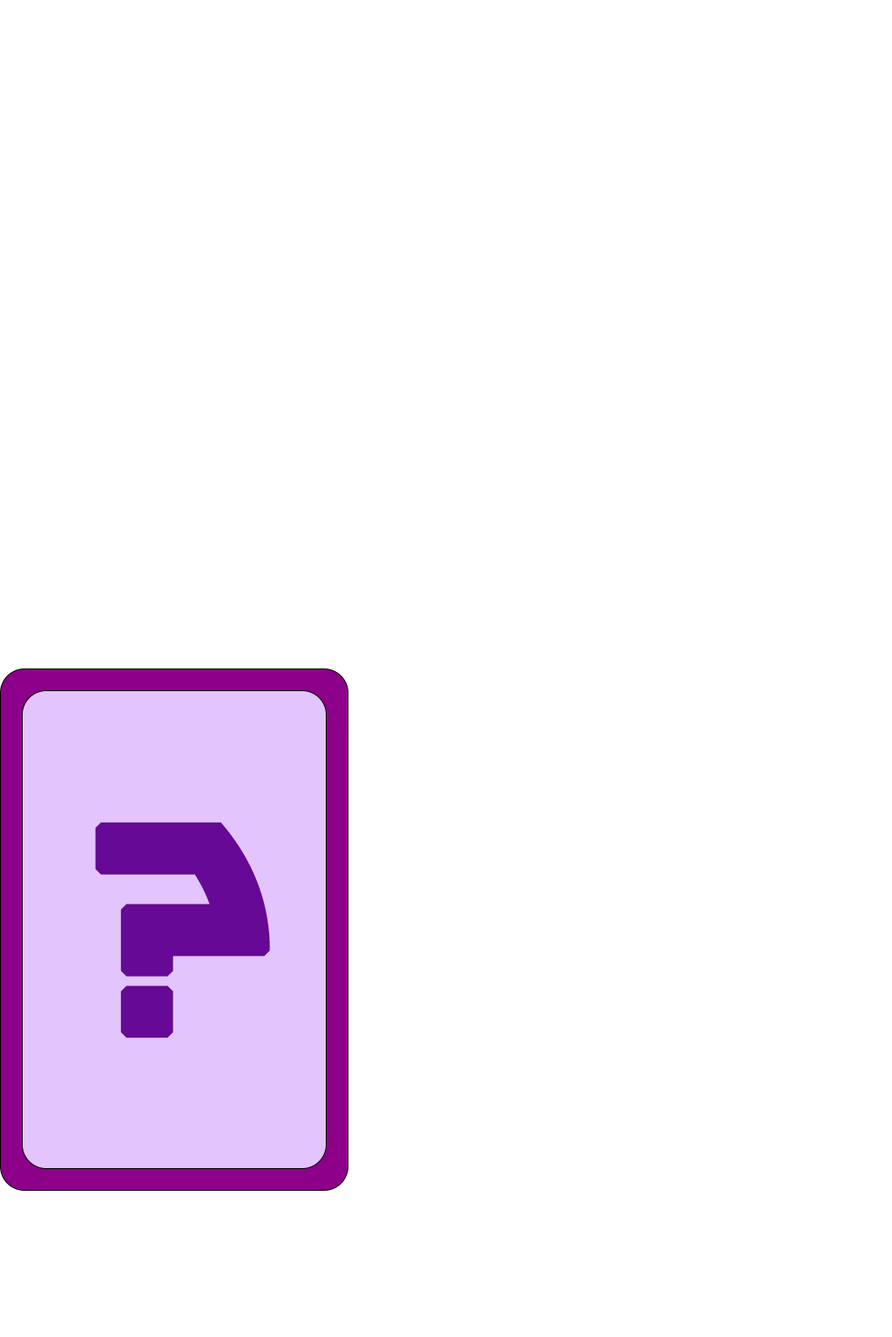
<style>
.page{position:relative;width:892px;height:1337px;background:#ffffff}
.page>*{position:absolute;margin:0}
.t1{font:417.9px "mr_Arounder-Arounder";color:#660996;text-transform:uppercase;font-weight:bold}
</style>
<div class="page">
<p class="t1" style="left:95px;top:822px;width:175px;height:217px">?</p>
</div>
